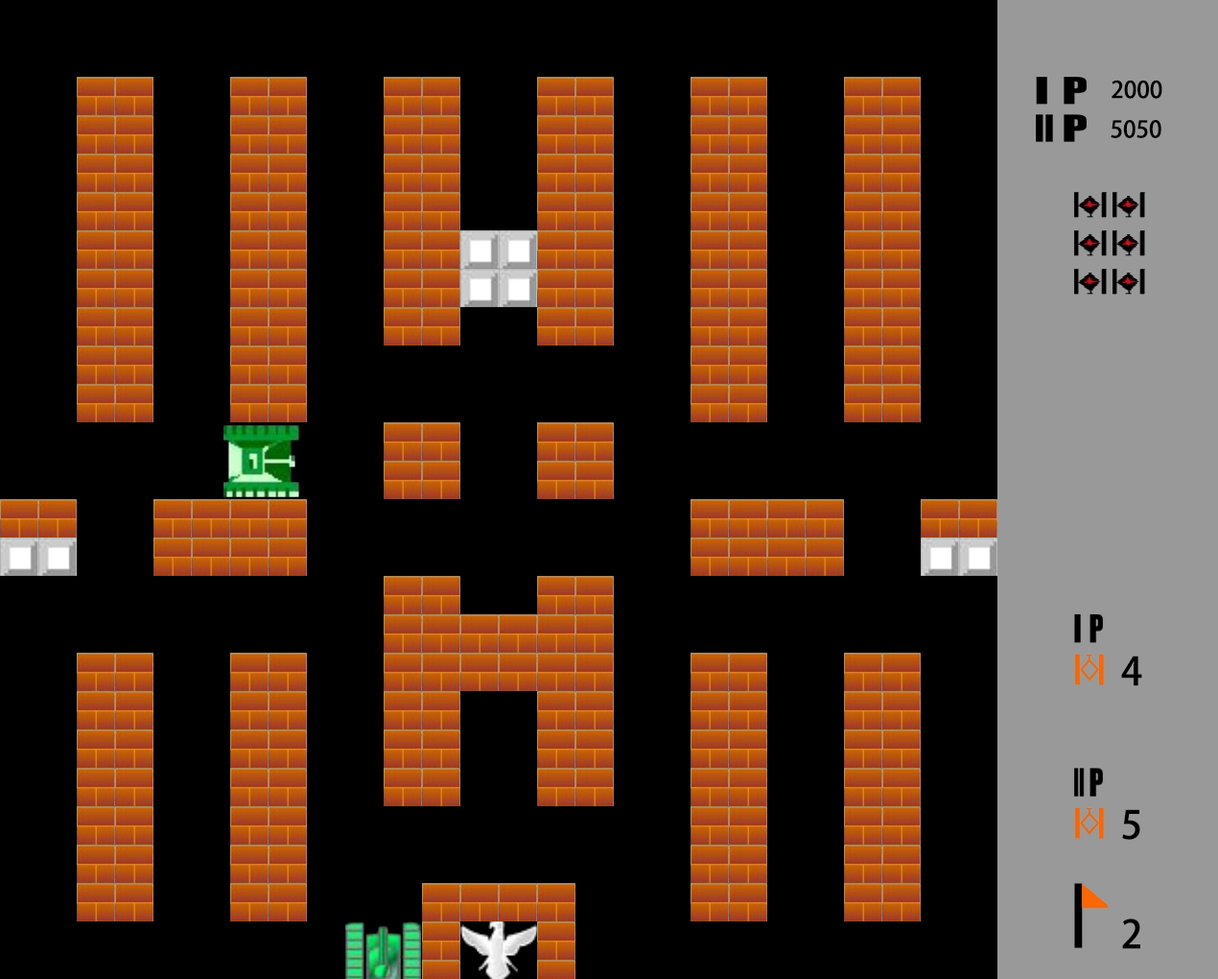
<style>
.page{position:relative;width:1218px;height:979px;background:#000000}
.page>*{position:absolute;margin:0}
.t1{font:23px "AdobeHeitiStd-Regular";color:#000000}
.t2{font:38.4px "AdobeHeitiStd-Regular";color:#000000}
</style>
<div class="page">
<p class="t1" style="left:1112px;top:80px;width:51px;height:19px">2000</p>
<p class="t1" style="left:1111px;top:120px;width:51px;height:18px">5050</p>
<p class="t2" style="left:1122px;top:655px;width:21px;height:31px">4</p>
<p class="t2" style="left:1123px;top:809px;width:18px;height:31px">5</p>
<p class="t2" style="left:1123px;top:918px;width:18px;height:31px">2</p>
</div>
